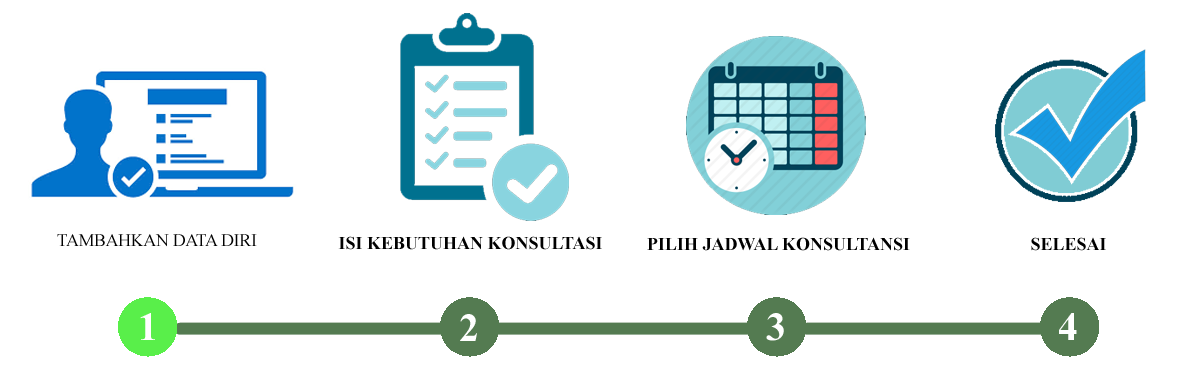
<style>
.page{position:relative;width:1200px;height:381px;background:#ffffff}
.page>*{position:absolute;margin:0}
.t1{font:18px "TimesNewRomanPS-BoldMT";color:#000000}
.t2{font:40px "TimesNewRomanPS-BoldMT";color:#ffffff}
</style>
<div class="page">
<p class="t1" style="left:338px;top:236px;width:264px;height:14px">ISI KEBUTUHAN KONSULTASI</p>
<p class="t1" style="left:647px;top:237px;width:263px;height:14px">PILIH JADWAL KONSULTANSI</p>
<p class="t1" style="left:1031px;top:237px;width:75px;height:14px">SELESAI</p>
<p class="t2" style="left:140px;top:313px;width:15px;height:27px">1</p>
<p class="t2" style="left:460px;top:314px;width:17px;height:27px">2</p>
<p class="t2" style="left:766px;top:313px;width:18px;height:28px">3</p>
<p class="t2" style="left:1059px;top:313px;width:18px;height:27px">4</p>
</div>
